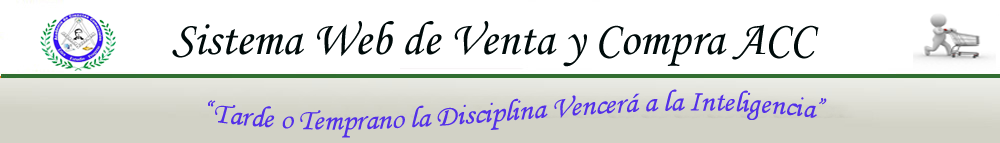
<style>
.page{position:relative;width:1000px;height:143px;background:#ffffff}
.page>*{position:absolute;margin:0}
.t1{font:48px "MonotypeCorsiva";color:#000b0b}
.t2{font:30px "MonotypeCorsiva";color:#5330e8}
</style>
<div class="page">
<p class="t1" style="left:172px;top:21px;width:647px;height:46px">Sistema Web de Venta y Compra ACC</p>
<p class="t2" style="left:208px;top:89px;width:619px;height:49px">“Tarde o Temprano la Disciplina Vencerá a la Inteligencia”</p>
</div>
